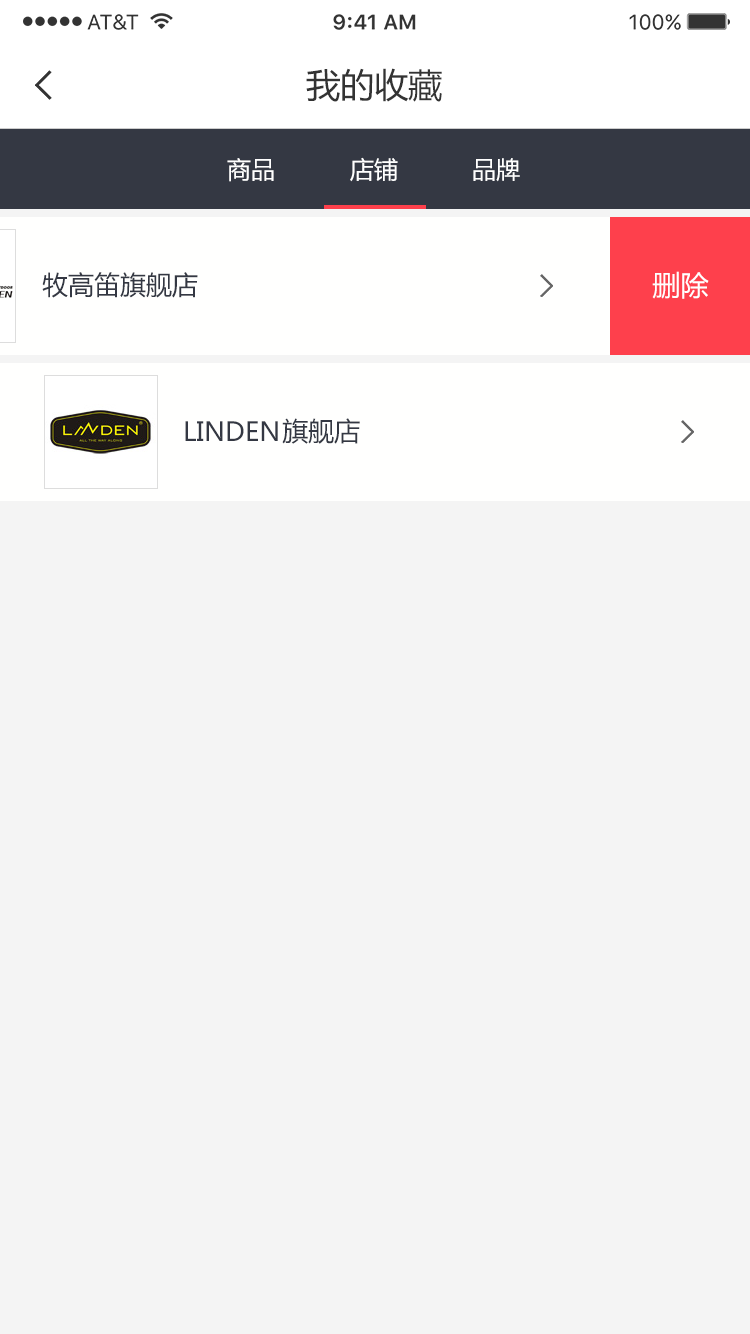
<style>
.page{position:relative;width:750px;height:1334px;background:#f4f4f4}
.page>*{position:absolute;margin:0}
.t1{font:34px "MicrosoftYaHei";color:#333333}
.t2{font:24px "MicrosoftYaHei";color:#ffffff}
.t3{font:26px "MicrosoftYaHei";color:#343843}
.t4{font:28px "MicrosoftYaHei";color:#ffffff}
</style>
<div class="page">
<p class="t1" style="left:306px;top:68px;width:136px;height:34px">我的收藏</p>
<p class="t2" style="left:227px;top:158px;width:47px;height:24px">商品</p>
<p class="t2" style="left:350px;top:157px;width:48px;height:25px">店铺</p>
<p class="t2" style="left:473px;top:158px;width:47px;height:24px">品牌</p>
<p class="t3" style="left:42px;top:272px;width:156px;height:26px">牧高笛旗舰店</p>
<p class="t4" style="left:652px;top:271px;width:57px;height:28px">删除</p>
<p class="t3" style="left:185px;top:421px;width:93px;height:20px">LINDEN</p>
<p class="t3" style="left:282px;top:418px;width:78px;height:26px">旗舰店</p>
</div>
